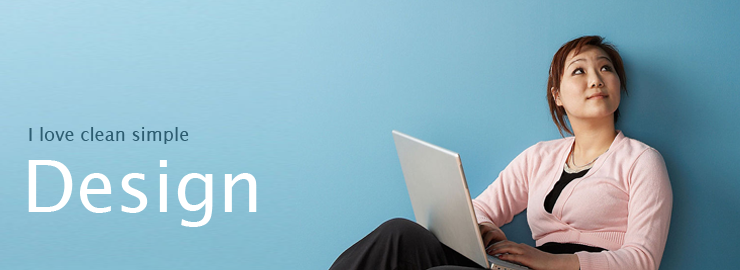
<style>
.page{position:relative;width:740px;height:270px}
.page>*{position:absolute;margin:0}
.t1{font:18px "LucidaSans";color:#2c5c70}
.t2{font:72px "LucidaSans";color:#ffffff}
</style>
<div class="page">
<p class="t1" style="left:29px;top:127px;width:160px;height:17px">I love clean simple</p>
<p class="t2" style="left:28px;top:160px;width:229px;height:67px">Design</p>
</div>
